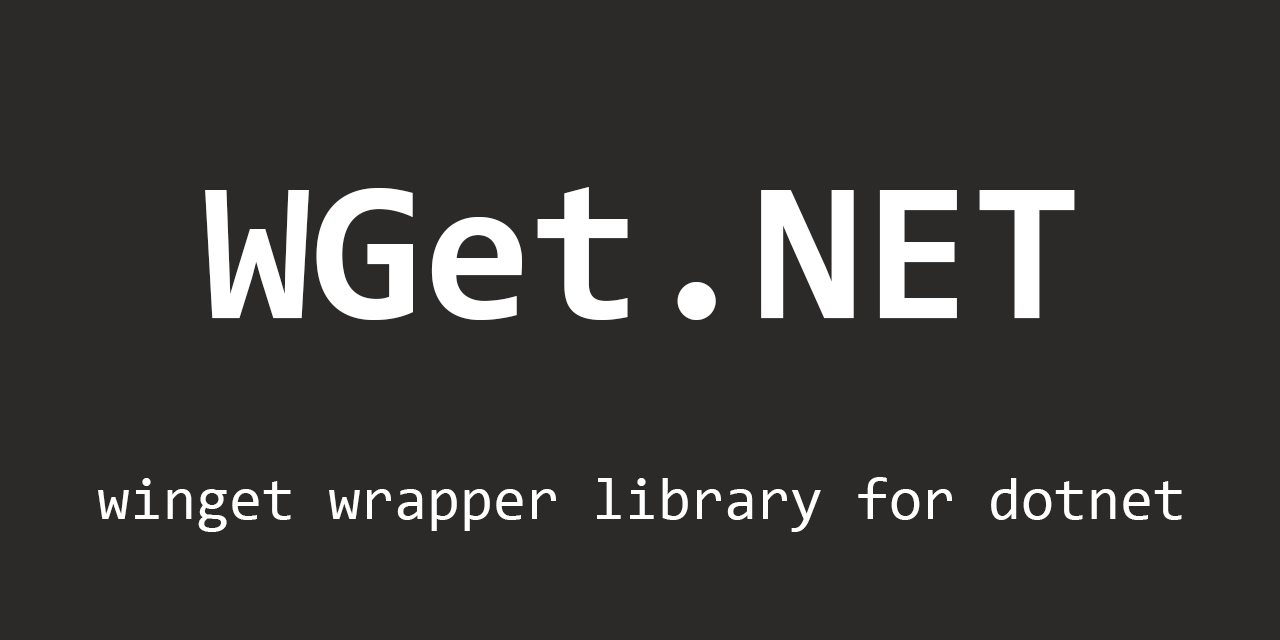
<style>
.page{position:relative;width:1280px;height:640px;background:#2c2a29}
.page>*{position:absolute;margin:0}
.t1{font:200px "Consolas-Bold";color:#ffffff}
.t2{font:60px "Consolas";color:#ffffff}
</style>
<div class="page">
<p class="t1" style="left:205px;top:187px;width:870px;height:133px">WGet.NET</p>
<p class="t2" style="left:98px;top:477px;width:1084px;height:55px">winget wrapper library for dotnet</p>
</div>
